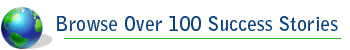
<style>
.page{position:relative;width:350px;height:50px;background:#ffffff}
.page>*{position:absolute;margin:0}
.t1{font:20px "BellGothicStd-Bold";color:#09407e}
</style>
<div class="page">
<p class="t1" style="left:57px;top:16px;width:281px;height:15px">Browse Over 100 Success Stories</p>
</div>
